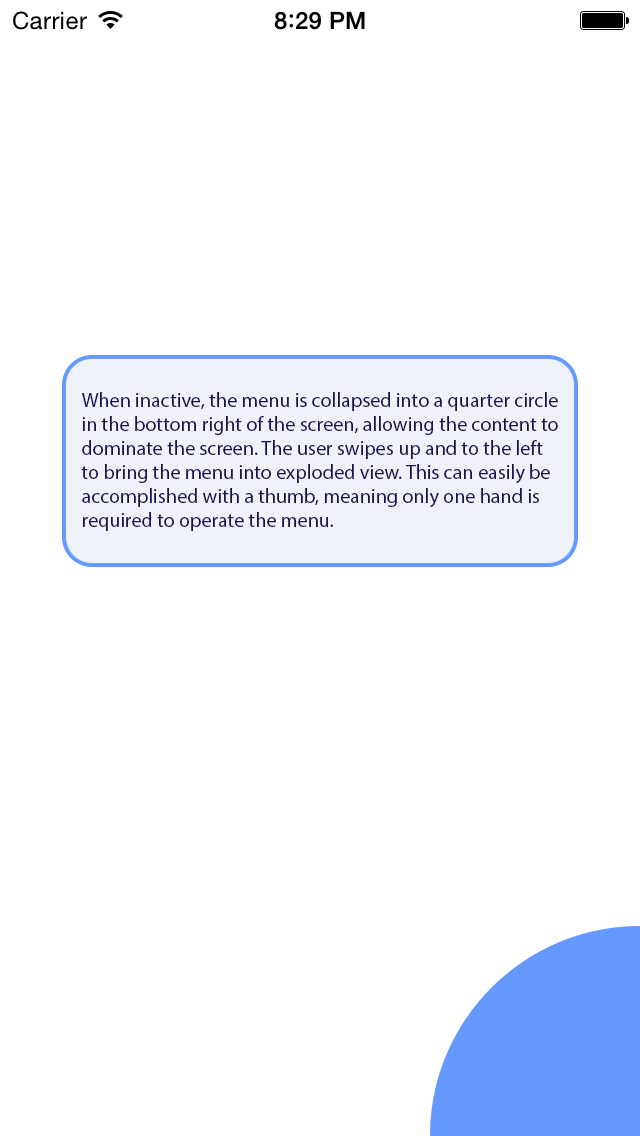
<style>
.page{position:relative;width:640px;height:1136px;background:#ffffff}
.page>*{position:absolute;margin:0}
.t1{font:20.1px "MyriadPro-Regular";color:#191251}
</style>
<div class="page">
<p class="t1" style="left:81px;top:392px;width:477px;height:139px">When inactive, the menu is collapsed into a quarter circle<br>in the bottom right of the screen, allowing the content to<br>dominate the screen. The user swipes up and to the left<br>to bring the menu into exploded view. This can easily be <br>accomplished with a thumb, meaning only one hand is <br>required to operate the menu.</p>
</div>
